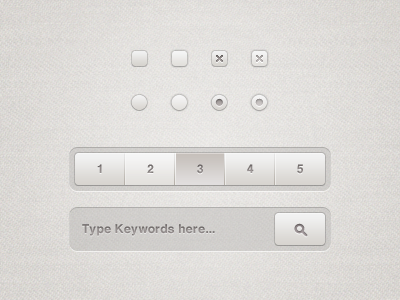
<style>
.page{position:relative;width:400px;height:300px}
.page>*{position:absolute;margin:0}
.t1{font:12px "Helvetica-Bold";letter-spacing:0.025em;color:#908989}
.t2{font:12px "Helvetica-Bold";letter-spacing:0.025em}
.t3{font:12px "Helvetica-Bold";letter-spacing:0.025em;color:#847e7d}
.t4{font:12px "Helvetica-Bold";letter-spacing:0.025em;color:#908988}
.t5{font:12px "Helvetica-Bold";letter-spacing:0.025em;color:#817b7a}
.t6{font:12px "Helvetica-Bold";letter-spacing:0.025em;color:#8d8786}
</style>
<div class="page">
<p class="t1" style="left:97px;top:164px;width:5px;height:9px">1</p>
<p class="t2" style="left:147px;top:164px;width:7px;height:9px">2</p>
<p class="t3" style="left:197px;top:164px;width:6px;height:10px">3</p>
<p class="t4" style="left:247px;top:164px;width:7px;height:9px">4</p>
<p class="t5" style="left:297px;top:164px;width:6px;height:10px">5</p>
<p class="t6" style="left:82px;top:224px;width:133px;height:12px">Type Keywords here...</p>
</div>
